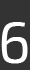
<style>
.page{position:relative;width:30px;height:70px;background:#333333}
.page>*{position:absolute;margin:0}
.t1{font:57px "Exo2-Regular";color:#fefefe}
</style>
<div class="page">
<p class="t1" style="left:1px;top:22px;width:27px;height:42px">6</p>
</div>
